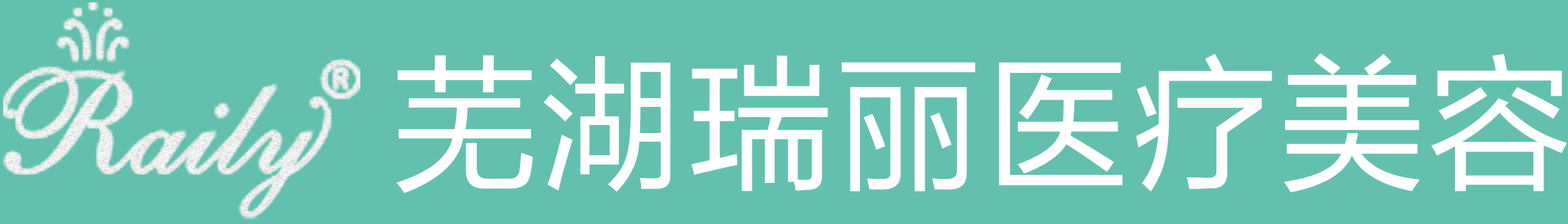
<style>
.page{position:relative;width:1568px;height:224px;background:#63c0ae}
.page>*{position:absolute;margin:0}
.t1{font:146.8px "FZLTHK--GBK1-0";letter-spacing:0.025em;color:#ffffff}
</style>
<div class="page">
<p class="t1" style="left:396px;top:53px;width:1171px;height:140px">芜湖瑞丽医疗美容</p>
</div>
